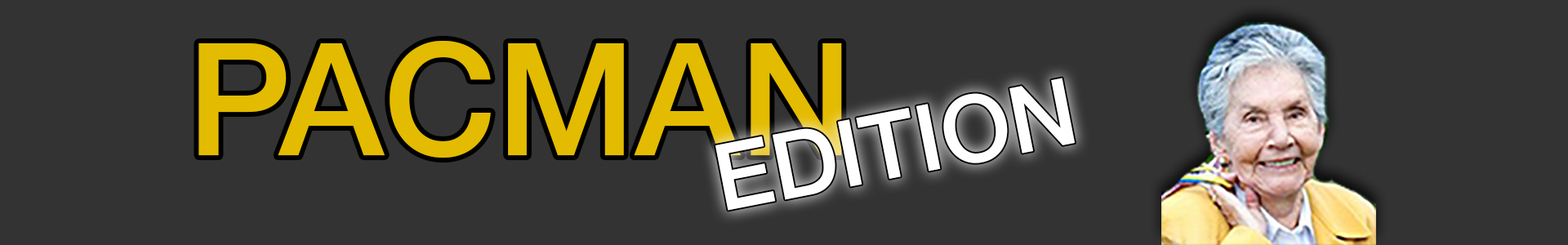
<style>
.page{position:relative;width:1568px;height:245px;background:#333333}
.page>*{position:absolute;margin:0}
.t1{font:156.4px "HelveticaNeue-Medium";color:#e3bb01}
.t2{font:92.4px "HelveticaNeue-Medium";color:#ffffff}
</style>
<div class="page">
<p class="t1" style="left:198px;top:41px;width:644px;height:117px">PACMAN</p>
<p class="t2" style="left:715px;top:78px;width:360px;height:133px;rotate:-11deg">EDITION</p>
</div>
